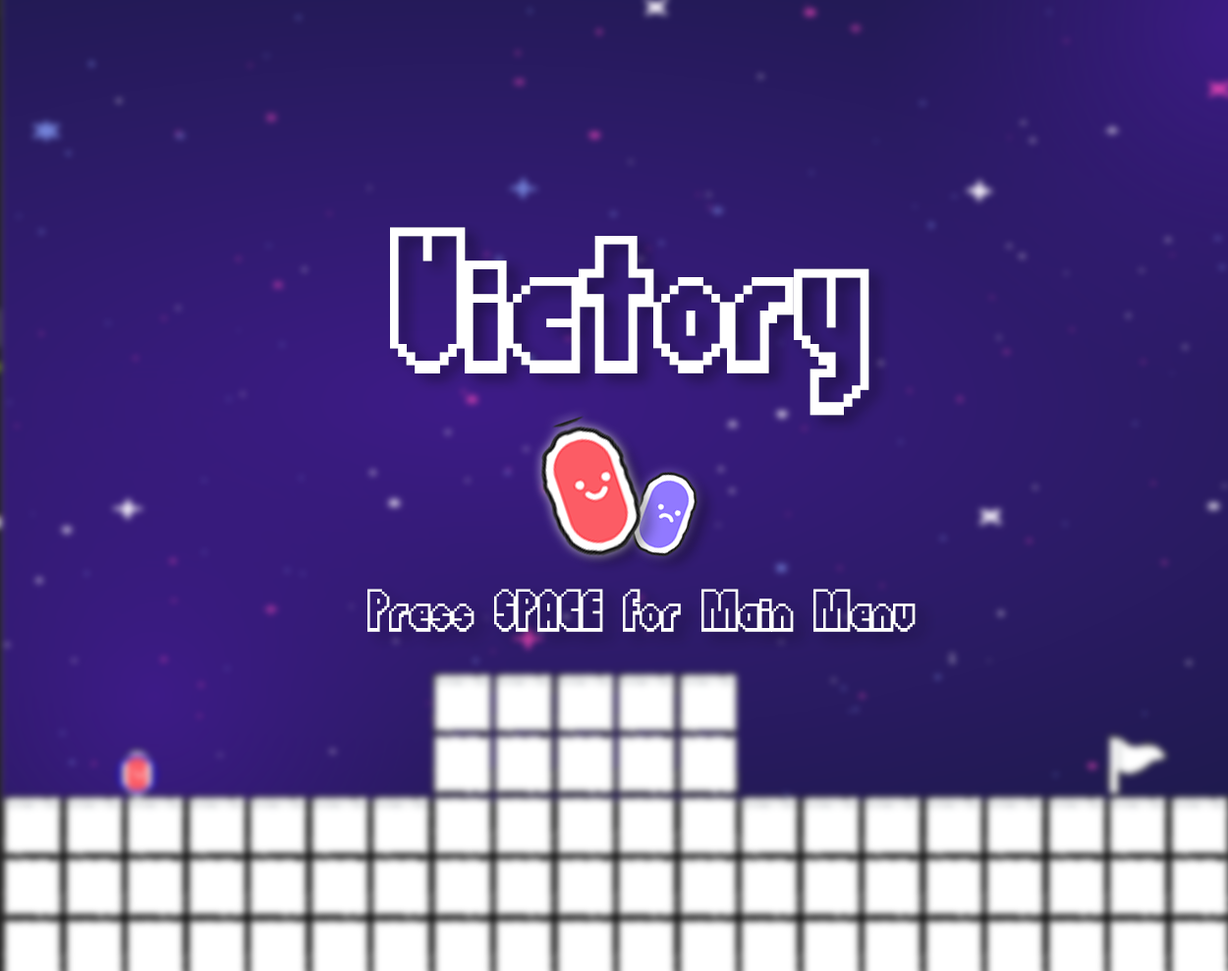
<style>
.page{position:relative;width:1228px;height:971px}
.page>*{position:absolute;margin:0}
.t1{font:266.2px "FlappyBirdy";color:#ffffff}
.t2{font:77.8px "FlappyBirdy";color:#ffffff}
</style>
<div class="page">
<p class="t1" style="left:390px;top:227px;width:480px;height:189px">Victory</p>
<p class="t2" style="left:367px;top:589px;width:549px;height:43px">Press SPACE for Main Menu</p>
</div>
